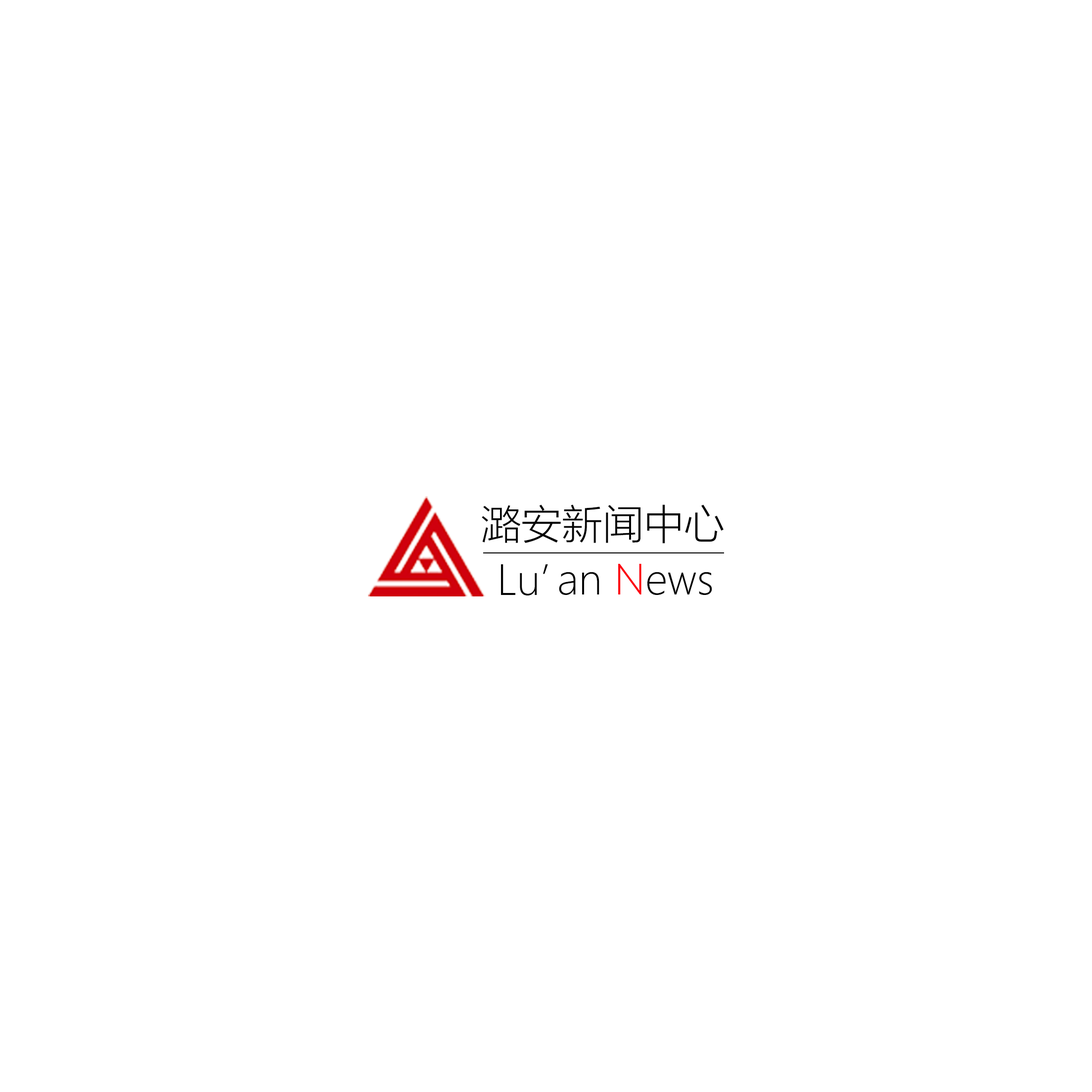
<style>
.page{position:relative;width:1092px;height:1092px;background:#ffffff}
.page>*{position:absolute;margin:0}
.t1{font:40.5px "MicrosoftYaHeiLight";color:#030303}
.t2{font:40.5px "MicrosoftYaHeiUILight";color:#030303}
.t3{font:40.5px "MicrosoftYaHeiUILight";color:#fc0511}
</style>
<div class="page">
<p class="t1" style="left:482px;top:504px;width:242px;height:40px">潞安新闻中心</p>
<p class="t2" style="left:501px;top:564px;width:47px;height:31px">Lu’</p>
<p class="t2" style="left:559px;top:564px;width:153px;height:31px">an <span class="t3">N</span>ews</p>
</div>
